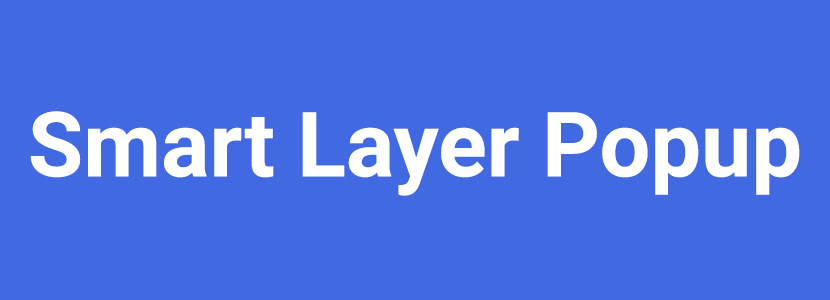
<style>
.page{position:relative;width:830px;height:300px;background:#4169e1}
.page>*{position:absolute;margin:0}
.t1{font:90px "Roboto-Bold";color:#ffffff}
</style>
<div class="page">
<p class="t1" style="left:30px;top:111px;width:770px;height:85px">Smart Layer Popup</p>
</div>
